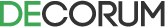
<style>
.page{position:relative;width:166px;height:27px;background:#ffffff}
.page>*{position:absolute;margin:0}
.t1{font:36px "Code-Bold";color:#333333;text-transform:uppercase;scale:1.06 1}
.t2{font:36px "Code-Bold";color:#3da754;text-transform:uppercase;scale:1.06 1}
</style>
<div class="page">
<p class="t1" style="left:0px;top:0px;width:165px;height:27px"><span class="t2">de</span>Corum</p>
</div>
